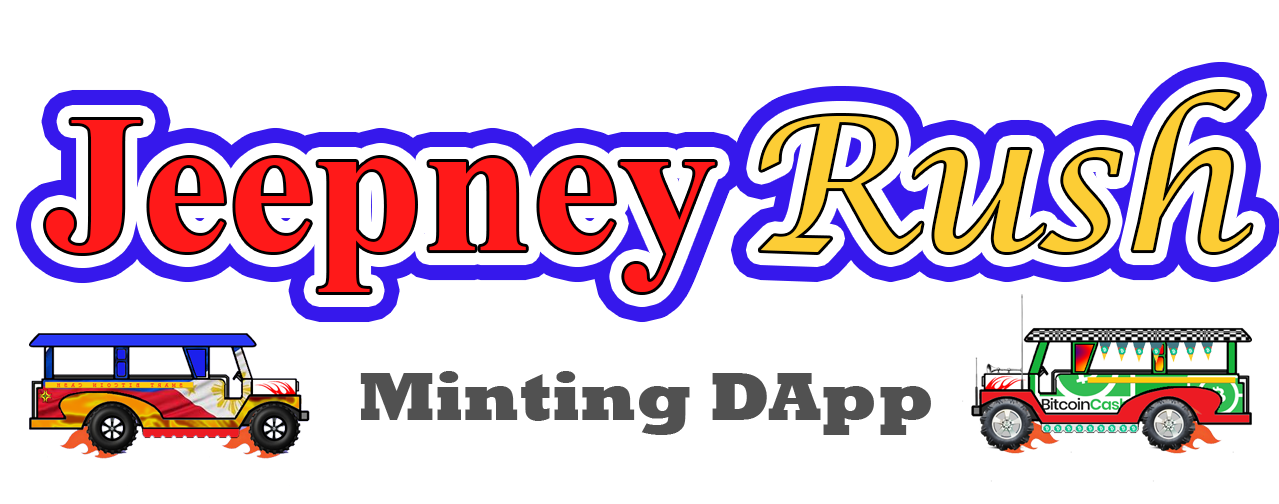
<style>
.page{position:relative;width:1279px;height:504px;background:#ffffff}
.page>*{position:absolute;margin:0}
.t1{font:185.4px "LucidaCalligraphy-Italic";color:#fccd35}
.t2{font:195.2px "TimesNewRomanPS-BoldMT";color:#ff1919}
.t3{font:70px "Rockwell-ExtraBold";color:#515151}
</style>
<div class="page">
<p class="t1" style="left:760px;top:92px;width:491px;height:160px">Rush</p>
<p class="t2" style="left:46px;top:120px;width:669px;height:172px">Jeepney</p>
<p class="t3" style="left:360px;top:371px;width:571px;height:64px">Minting DApp</p>
</div>
